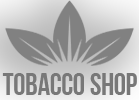
<style>
.page{position:relative;width:139px;height:100px}
.page>*{position:absolute;margin:0}
.t1{font:30.8px "AA-BebasNeue";letter-spacing:0.005em;color:#787878}
</style>
<div class="page">
<p class="t1" style="left:2px;top:73px;width:135px;height:22px">TOBACCO SHOP</p>
</div>
